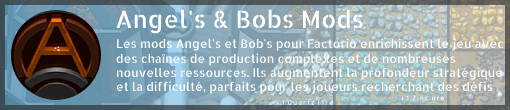
<style>
.page{position:relative;width:510px;height:110px}
.page>*{position:absolute;margin:0}
.t1{font:24px "AllertaStencil-Regular";color:#ffffff}
.t2{font:12px "AllertaStencil-Regular";color:#ffffff}
</style>
<div class="page">
<p class="t1" style="left:116px;top:9px;width:247px;height:25px">Angel's &amp; Bobs Mods</p>
<p class="t2" style="left:116px;top:38px;width:388px;height:56px">Les mods Angel's et Bob's pour Factorio enrichissent le jeu avec des chaînes de production complexes et de nombreuses nouvelles ressources. Ils augmentent la profondeur stratégique et la difficulté, parfaits pour les joueurs recherchant des défis industriels intenses et détaillés.</p>
</div>
